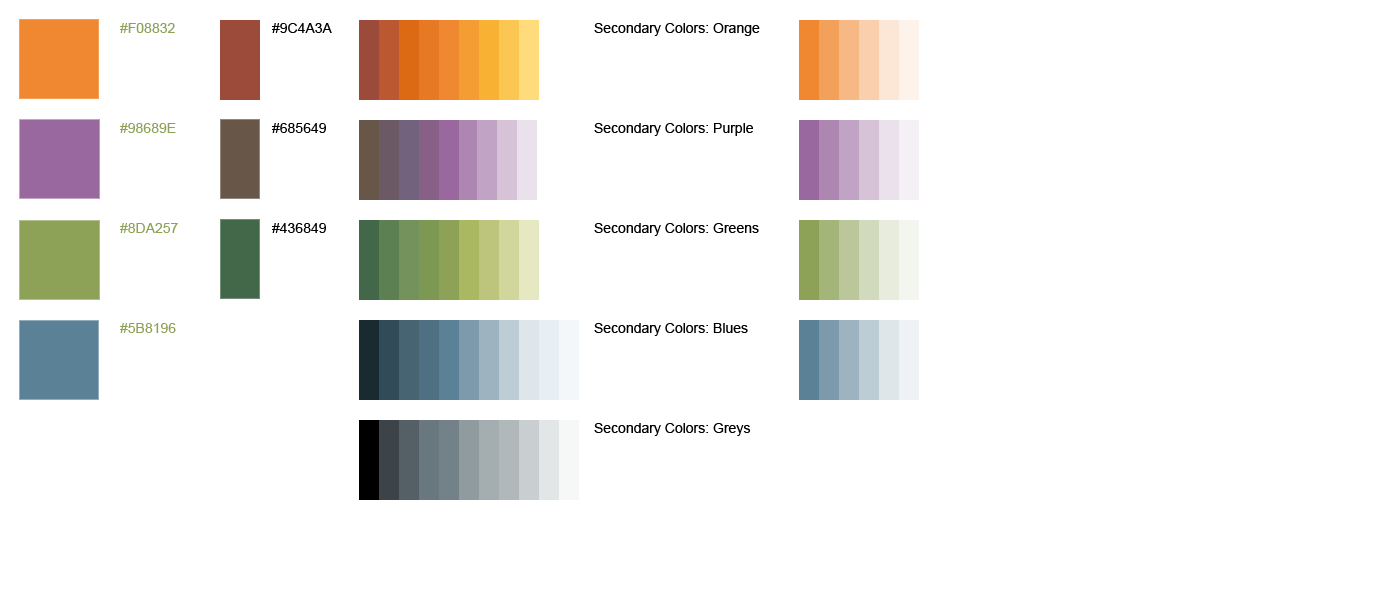
<style>
.page{position:relative;width:1400px;height:600px;background:#ffffff}
.page>*{position:absolute;margin:0}
.t1{font:14px/100px "ArialMT";color:#8da257}
.t2{font:14px/100px "ArialMT";color:#000000}
</style>
<div class="page">
<p class="t1" style="left:120px;top:23px;width:58px;height:310px">#F08832<br>#98689E<br>#8DA257<br>#5B8196</p>
<p class="t2" style="left:272px;top:23px;width:60px;height:210px">#9C4A3A<br>#685649<br>#436849</p>
<p class="t2" style="left:594px;top:23px;width:166px;height:413px">Secondary Colors: Orange<br>Secondary Colors: Purple<br>Secondary Colors: Greens<br>Secondary Colors: Blues<br>Secondary Colors: Greys</p>
</div>
